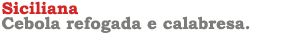
<style>
.page{position:relative;width:300px;height:50px;background:#ffffff}
.page>*{position:absolute;margin:0}
.t1{font:17px "BookmanOldStyle-Bold";color:#d42525}
.t2{font:17px "BookmanOldStyle-Bold";color:#7c7c79}
</style>
<div class="page">
<p class="t1" style="left:2px;top:1px;width:76px;height:14px">Siciliana</p>
<p class="t2" style="left:2px;top:16px;width:248px;height:17px">Cebola refogada e calabresa.</p>
</div>
